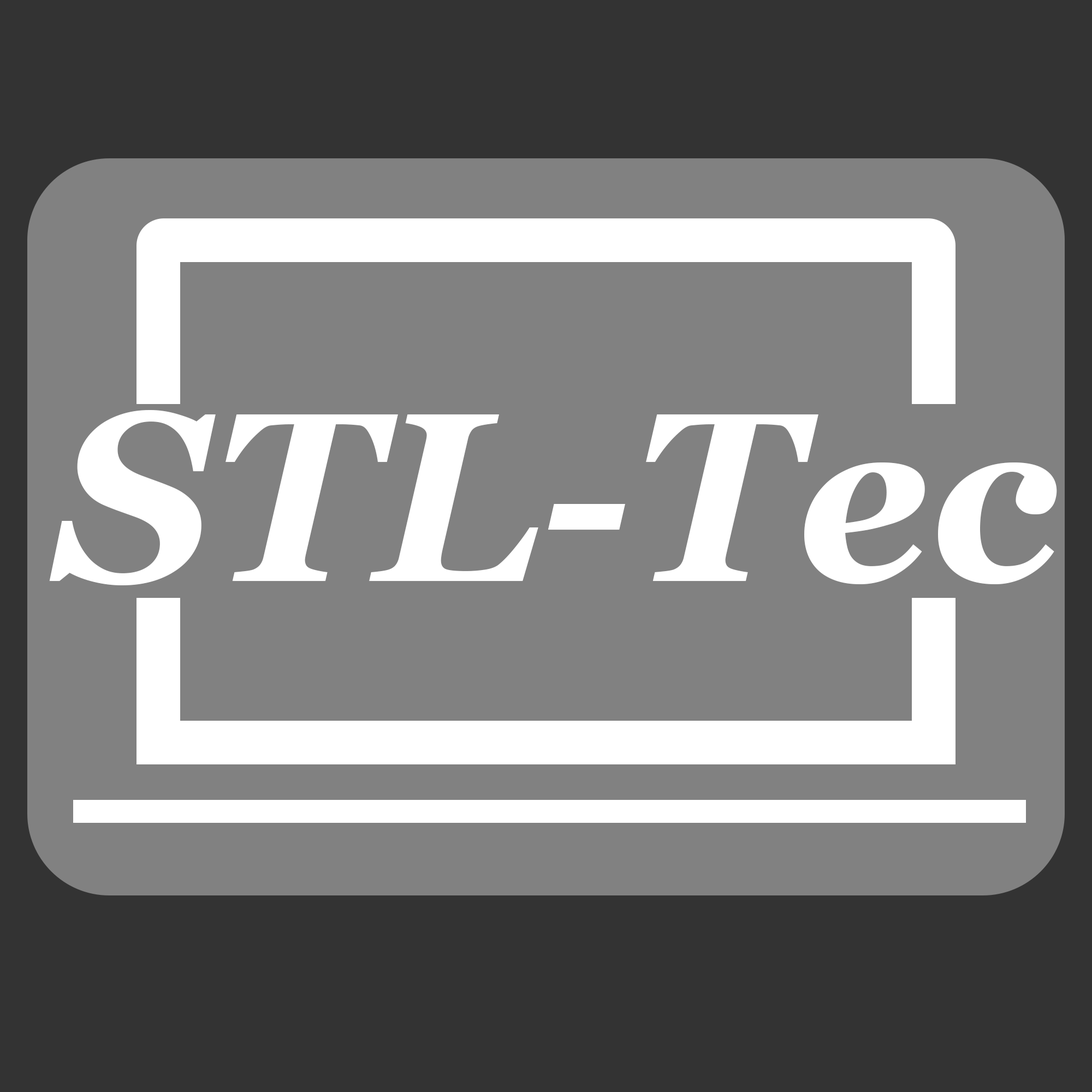
<style>
.page{position:relative;width:1092px;height:1092px;background:#818181}
.page>*{position:absolute;margin:0}
.t1{font:240.2px "Georgia-BoldItalic";color:#ffffff}
</style>
<div class="page">
<p class="t1" style="left:49px;top:410px;width:1008px;height:175px">STL-Tec</p>
</div>
